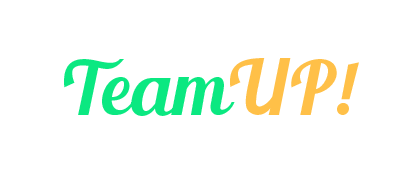
<style>
.page{position:relative;width:400px;height:172px;background:#ffffff}
.page>*{position:absolute;margin:0}
.t1{font:75px "BlendaScript";color:#0be881}
.t2{font:75px "BlendaScript";color:#ffc048}
</style>
<div class="page">
<p class="t1" style="left:64px;top:58px;width:295px;height:58px">Team<span class="t2">UP!</span></p>
</div>
